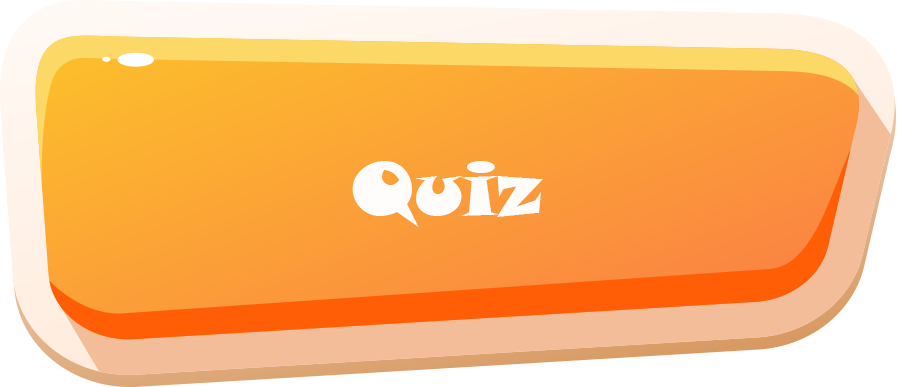
<style>
.page{position:relative;width:897px;height:387px}
.page>*{position:absolute;margin:0}
.t1{font:75px "SnapITC-Regular";color:#fefdfc}
</style>
<div class="page">
<p class="t1" style="left:352px;top:161px;width:191px;height:66px">Quiz</p>
</div>
